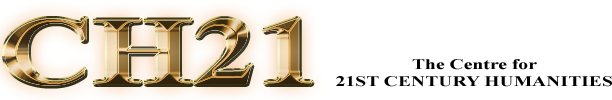
<style>
.page{position:relative;width:612px;height:100px;background:#ffffff}
.page>*{position:absolute;margin:0}
.t1{font:95.8px "TimesNewRomanPS-BoldMT";scale:1.34 1}
.t2{font:14.5px "TimesNewRomanPS-BoldMT";color:#000000;scale:1.36 1}
</style>
<div class="page">
<p class="t1" style="left:4px;top:19px;width:308px;height:67px">CH21</p>
<p class="t1" style="left:4px;top:19px;width:308px;height:67px">CH21</p>
<p class="t2" style="left:336px;top:59px;width:276px;height:28px;text-align:center">The Centre for<br>21ST CENTURY HUMANITIES</p>
</div>
